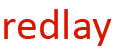
<style>
.page{position:relative;width:125px;height:50px;background:#ffffff}
.page>*{position:absolute;margin:0}
.t1{font:44.4px "Calibri";color:#dc1400}
</style>
<div class="page">
<p class="t1" style="left:4px;top:9px;width:108px;height:37px">redlay</p>
</div>
